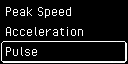
<style>
.page{position:relative;width:128px;height:64px;background:#000000}
.page>*{position:absolute;margin:0}
.t1{font:16px "PixelOperator";color:#ffffff}
</style>
<div class="page">
<p class="t1" style="left:6px;top:7px;width:66px;height:11px">Peak Speed</p>
<p class="t1" style="left:6px;top:27px;width:78px;height:9px">Acceleration</p>
<p class="t1" style="left:6px;top:47px;width:32px;height:9px">Pulse</p>
</div>
